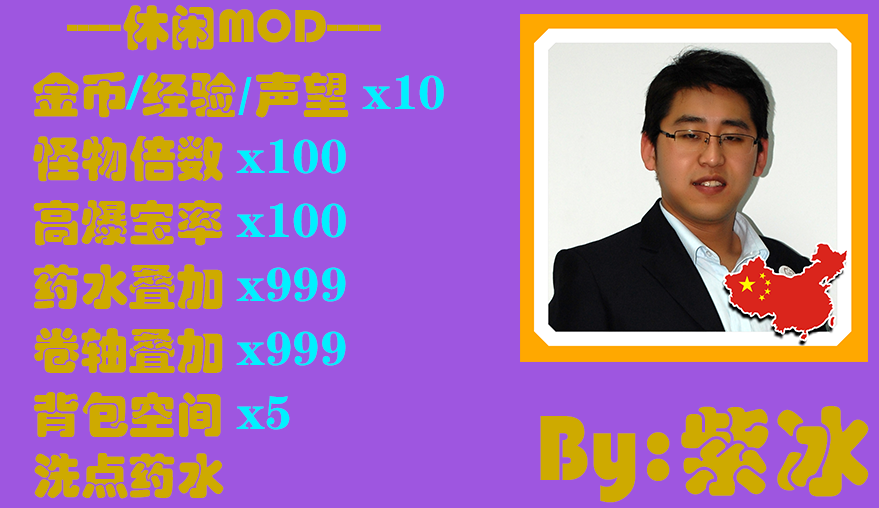
<style>
.page{position:relative;width:879px;height:508px;background:#9e56e0}
.page>*{position:absolute;margin:0}
.t1{font:48px/64px "STHupo";color:#ceaa00}
.t2{font:48px/64px "FZCHSJW--GB1-0";color:#00f0ff}
.t3{font:48px/64px "STHupo";color:#00f0ff}
.t4{font:96px "STHupo";color:#ceaa00}
</style>
<div class="page">
<p class="t1" style="left:33px;top:5px;width:411px;height:494px">-----休闲MOD-----<br>金币<span class="t2">/</span>经验<span class="t3">/</span>声望 <span class="t2">x10<br></span>怪物倍数 <span class="t2">x100<br></span>高爆宝率 <span class="t2">x100<br></span>药水叠加 <span class="t2">x999<br></span>卷轴叠加 <span class="t2">x999<br></span>背包空间 <span class="t2">x5<br></span>洗点药水</p>
<p class="t4" style="left:540px;top:406px;width:329px;height:97px">By:紫冰</p>
</div>
